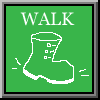
<style>
.page{position:relative;width:100px;height:100px;background:#39b54a}
.page>*{position:absolute;margin:0}
.t1{font:18px "Georgia";color:#ffffff}
</style>
<div class="page">
<p class="t1" style="left:20px;top:12px;width:55px;height:14px">WALK</p>
</div>
